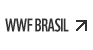
<style>
.page{position:relative;width:93px;height:50px;background:#ffffff}
.page>*{position:absolute;margin:0}
.t1{font:18px "WWF";letter-spacing:-0.025em;color:#333333}
</style>
<div class="page">
<p class="t1" style="left:5px;top:18px;width:64px;height:14px">WWF BRASIL</p>
</div>
